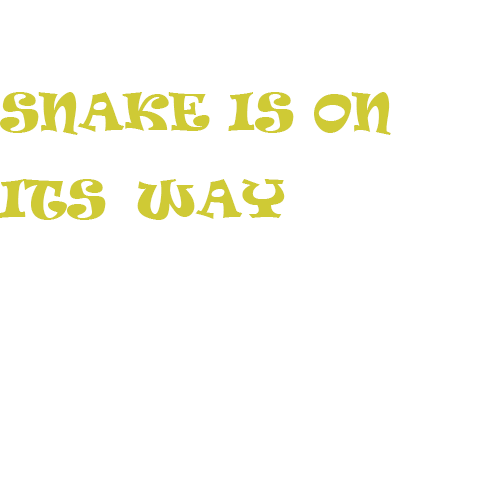
<style>
.page{position:relative;width:500px;height:500px;background:#ffffff}
.page>*{position:absolute;margin:0}
.t1{font:48px "Ravie";color:#cfca35}
.t2{font:72px "Ravie";color:#cfca35}
</style>
<div class="page">
<p class="t1" style="left:0px;top:92px;width:391px;height:128px">SNAKE IS ON ITS WAY<span class="t2"> AND COMING SOON</span></p>
</div>
